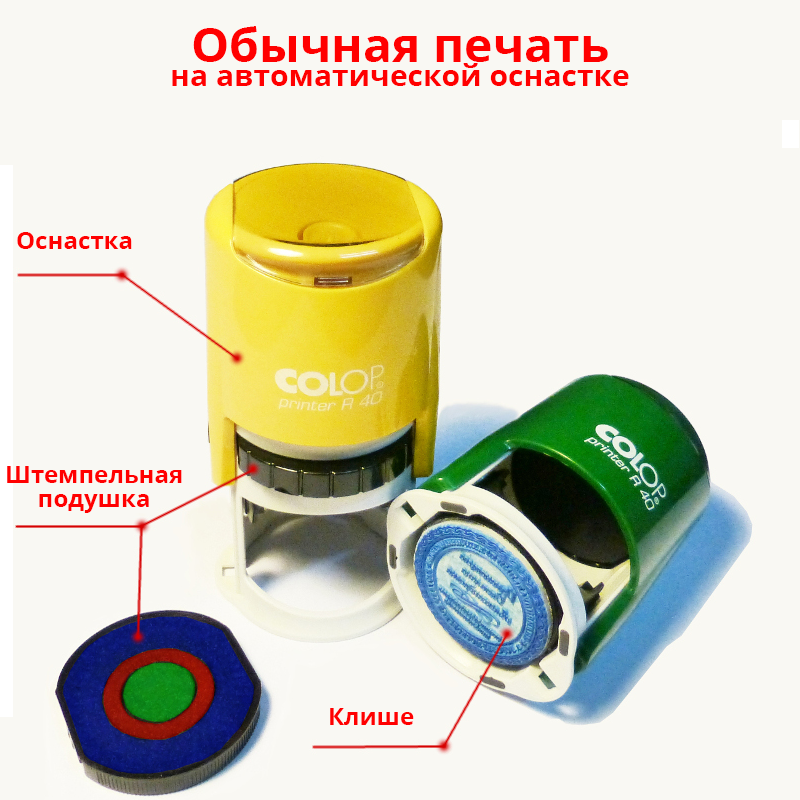
<style>
.page{position:relative;width:800px;height:800px;background:#f9f8f3}
.page>*{position:absolute;margin:0}
.t1{font:30px/24px "OpenSans-Bold";color:#ff0000}
.t2{font:48px/24px "OpenSans-Bold";color:#ff0000}
.t3{font:24px "OpenSans-Bold";color:#ff0000}
.t4{font:24px/24px "OpenSans-Bold";color:#ff0000}
</style>
<div class="page">
<p class="t1" style="left:172px;top:26px;width:457px;height:60px;text-align:center"><span class="t2">Обычная печать<br></span>на автоматической оснастке</p>
<p class="t3" style="left:17px;top:232px;width:115px;height:17px">Оснастка</p>
<p class="t4" style="left:7px;top:466px;width:175px;height:47px;text-align:center">Штемпельная подушка</p>
<p class="t3" style="left:330px;top:708px;width:84px;height:17px">Клише</p>
</div>
